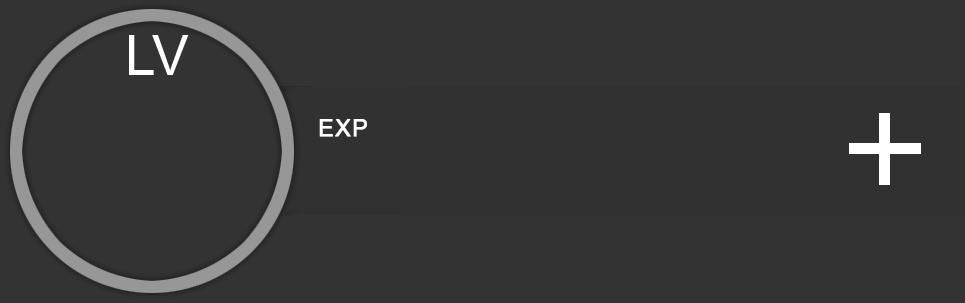
<style>
.page{position:relative;width:965px;height:303px;background:#333333}
.page>*{position:absolute;margin:0}
.t1{font:55px "ArialMT";letter-spacing:0.04em;color:#ffffff}
.t2{font:23px "ArialMT";letter-spacing:0.04em;color:#ffffff;font-weight:bold}
</style>
<div class="page">
<p class="t1" style="left:129px;top:35px;width:60px;height:40px">LV</p>
<p class="t2" style="left:319px;top:119px;width:48px;height:18px">EXP</p>
</div>
